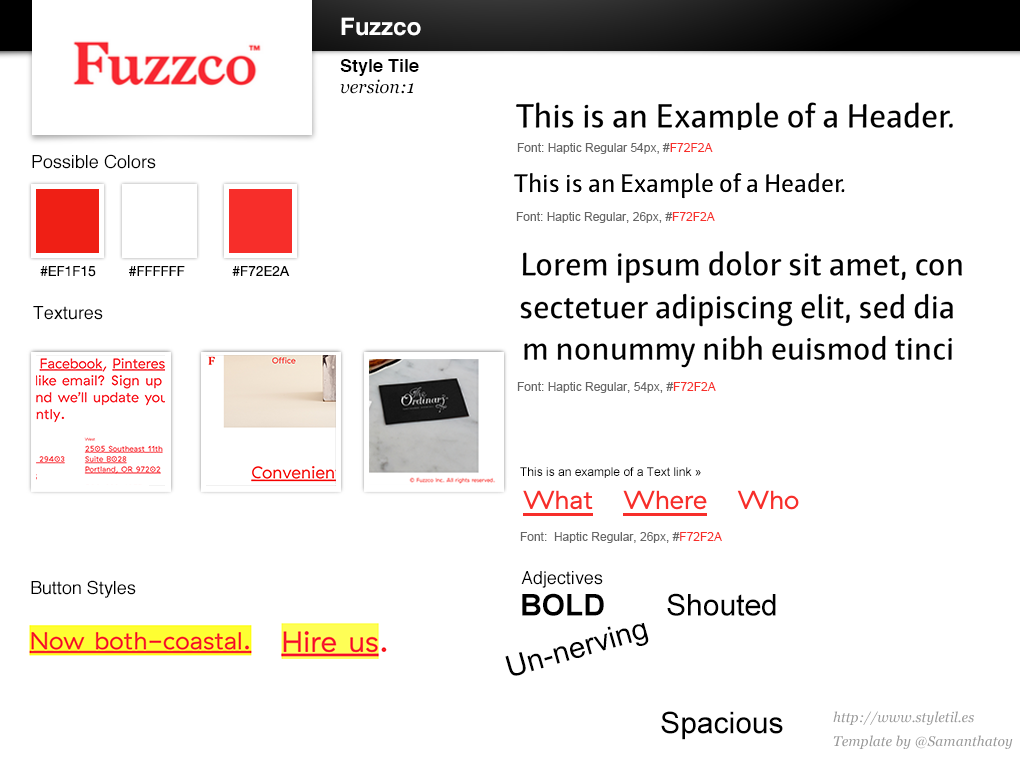
<style>
.page{position:relative;width:1020px;height:760px;background:#ffffff}
.page>*{position:absolute;margin:0}
.t1{font:24px "Helvetica-Bold";color:#ffffff}
.t2{font:18px "Helvetica-Bold";color:#000000}
.t3{font:18px "Georgia-Italic";color:#000000}
.t4{font:12px "ArialMT";color:#666666}
.t5{font:12px "ArialMT";color:#f72f2a}
.t6{font:18px "Helvetica";color:#000000}
.t7{font:14px "HelveticaNeue";color:#000000}
.t8{font:12px "ArialMT";color:#000000}
.t9{font:30px "Arial-BoldMT";color:#000000}
.t10{font:30px "ArialMT";color:#000000}
.t11{font:14px/24px "Georgia-Italic";color:#999999}
</style>
<div class="page">
<p class="t1" style="left:341px;top:17px;width:80px;height:19px">Fuzzco</p>
<p class="t2" style="left:340px;top:59px;width:79px;height:17px">Style Tile</p>
<p class="t3" style="left:340px;top:79px;width:74px;height:15px">version:1</p>
<p class="t4" style="left:517px;top:143px;width:196px;height:11px">Font: Haptic Regular 54px, #<span class="t5">F72F2A</span></p>
<p class="t6" style="left:32px;top:154px;width:124px;height:15px">Possible Colors</p>
<p class="t4" style="left:516px;top:212px;width:199px;height:11px">Font: Haptic Regular, 26px, #<span class="t5">F72F2A</span></p>
<p class="t7" style="left:40px;top:266px;width:56px;height:11px">#EF1F15</p>
<p class="t7" style="left:129px;top:266px;width:56px;height:10px">#FFFFFF</p>
<p class="t7" style="left:232px;top:266px;width:58px;height:10px">#F72E2A</p>
<p class="t6" style="left:33px;top:306px;width:70px;height:14px">Textures</p>
<p class="t4" style="left:517px;top:382px;width:199px;height:11px">Font: Haptic Regular, 54px, #<span class="t5">F72F2A</span></p>
<p class="t8" style="left:520px;top:467px;width:181px;height:12px">This is an example of a Text link »</p>
<p class="t4" style="left:520px;top:532px;width:202px;height:11px">Font:  Haptic Regular, 26px, #<span class="t5">F72F2A</span></p>
<p class="t6" style="left:31px;top:580px;width:105px;height:18px">Button Styles</p>
<p class="t6" style="left:521px;top:571px;width:82px;height:17px">Adjectives</p>
<p class="t9" style="left:522px;top:593px;width:82px;height:23px">BOLD</p>
<p class="t10" style="left:667px;top:593px;width:109px;height:23px">Shouted</p>
<p class="t10" style="left:505px;top:622px;width:144px;height:54px;rotate:-16deg">Un-nerving</p>
<p class="t10" style="left:661px;top:711px;width:122px;height:29px">Spacious</p>
<p class="t11" style="left:833px;top:711px;width:180px;height:38px">http://www.styletil.es<br>Template by @Samanthatoy</p>
</div>
